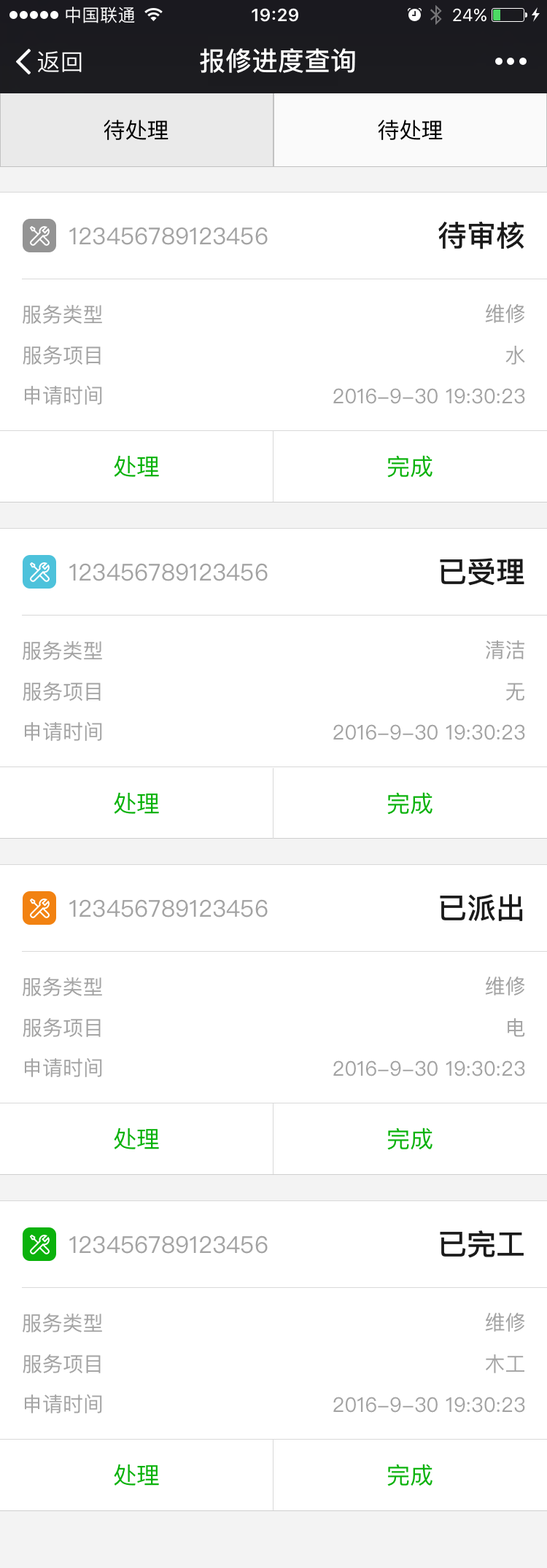
<style>
.page{position:relative;width:547px;height:1568px;background:#ffffff}
.page>*{position:absolute;margin:0}
.t1{font:26.3px "PingFangSC-Medium";color:#ffffff}
.t2{font:21.9px "PingFangSC-Regular";color:#000000}
.t3{font:29.2px "PingFangSC-Medium";color:#1a1a1a}
.t4{font:23.3px "PingFangSC-Regular";color:#a3a3a3}
.t5{font:20.4px "PingFangSC-Regular";color:#a3a3a3}
.t6{font:23.3px "PingFangSC-Regular";color:#0bb20c}
</style>
<div class="page">
<p class="t1" style="left:200px;top:48px;width:155px;height:25px">报修进度查询</p>
<p class="t2" style="left:104px;top:120px;width:64px;height:20px">待处理</p>
<p class="t2" style="left:378px;top:120px;width:65px;height:20px">待处理</p>
<p class="t3" style="left:438px;top:221px;width:86px;height:28px">待审核</p>
<p class="t4" style="left:69px;top:227px;width:199px;height:18px">123456789123456</p>
<p class="t5" style="left:23px;top:305px;width:79px;height:19px">服务类型</p>
<p class="t5" style="left:485px;top:304px;width:40px;height:19px">维修</p>
<p class="t5" style="left:23px;top:346px;width:78px;height:19px">服务项目</p>
<p class="t5" style="left:505px;top:346px;width:20px;height:19px">水</p>
<p class="t5" style="left:25px;top:386px;width:77px;height:19px">申请时间</p>
<p class="t5" style="left:333px;top:388px;width:192px;height:16px">2016-9-30 19:30:23</p>
<p class="t6" style="left:114px;top:455px;width:45px;height:22px">处理</p>
<p class="t6" style="left:387px;top:455px;width:45px;height:23px">完成</p>
<p class="t3" style="left:440px;top:558px;width:84px;height:28px">已受理</p>
<p class="t4" style="left:69px;top:563px;width:199px;height:18px">123456789123456</p>
<p class="t5" style="left:23px;top:641px;width:79px;height:19px">服务类型</p>
<p class="t5" style="left:486px;top:640px;width:38px;height:19px">清洁</p>
<p class="t5" style="left:23px;top:682px;width:78px;height:19px">服务项目</p>
<p class="t5" style="left:506px;top:683px;width:18px;height:18px">无</p>
<p class="t5" style="left:25px;top:722px;width:77px;height:19px">申请时间</p>
<p class="t5" style="left:333px;top:724px;width:192px;height:16px">2016-9-30 19:30:23</p>
<p class="t6" style="left:114px;top:792px;width:45px;height:22px">处理</p>
<p class="t6" style="left:387px;top:792px;width:45px;height:23px">完成</p>
<p class="t4" style="left:69px;top:899px;width:199px;height:18px">123456789123456</p>
<p class="t3" style="left:440px;top:894px;width:83px;height:27px">已派出</p>
<p class="t5" style="left:23px;top:977px;width:79px;height:19px">服务类型</p>
<p class="t5" style="left:485px;top:977px;width:40px;height:18px">维修</p>
<p class="t5" style="left:23px;top:1018px;width:78px;height:19px">服务项目</p>
<p class="t5" style="left:508px;top:1018px;width:17px;height:19px">电</p>
<p class="t5" style="left:25px;top:1058px;width:77px;height:19px">申请时间</p>
<p class="t5" style="left:333px;top:1060px;width:192px;height:16px">2016-9-30 19:30:23</p>
<p class="t6" style="left:114px;top:1128px;width:45px;height:21px">处理</p>
<p class="t6" style="left:387px;top:1128px;width:45px;height:22px">完成</p>
<p class="t4" style="left:69px;top:1235px;width:199px;height:19px">123456789123456</p>
<p class="t3" style="left:440px;top:1230px;width:84px;height:28px">已完工</p>
<p class="t5" style="left:23px;top:1313px;width:79px;height:19px">服务类型</p>
<p class="t5" style="left:485px;top:1313px;width:40px;height:19px">维修</p>
<p class="t5" style="left:23px;top:1354px;width:78px;height:19px">服务项目</p>
<p class="t5" style="left:486px;top:1354px;width:38px;height:19px">木工</p>
<p class="t5" style="left:25px;top:1394px;width:77px;height:19px">申请时间</p>
<p class="t5" style="left:333px;top:1397px;width:192px;height:16px">2016-9-30 19:30:23</p>
<p class="t6" style="left:114px;top:1464px;width:45px;height:22px">处理</p>
<p class="t6" style="left:387px;top:1464px;width:45px;height:22px">完成</p>
</div>
